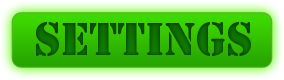
<style>
.page{position:relative;width:284px;height:80px}
.page>*{position:absolute;margin:0}
.t1{font:42.6px "StencilStd";color:#0c6200}
</style>
<div class="page">
<p class="t1" style="left:36px;top:22px;width:215px;height:34px">settings</p>
</div>
